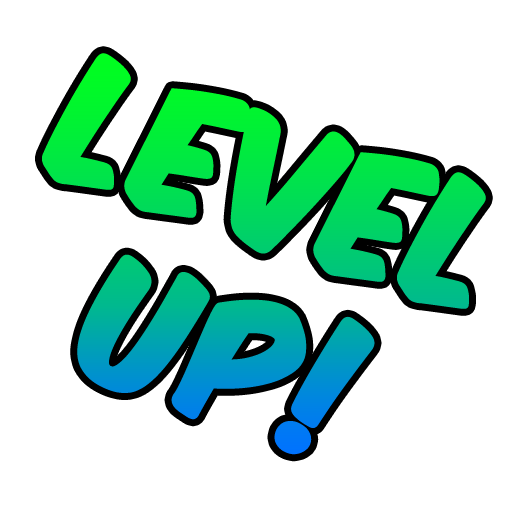
<style>
.page{position:relative;width:512px;height:512px;background:#ffffff}
.page>*{position:absolute;margin:0}
.t1{font:150px "KomikaAxis";font-weight:bold}
</style>
<div class="page">
<p class="t1" style="left:42px;top:53px;width:444px;height:402px;text-align:center;rotate:19deg">Level<br>up!</p>
</div>
